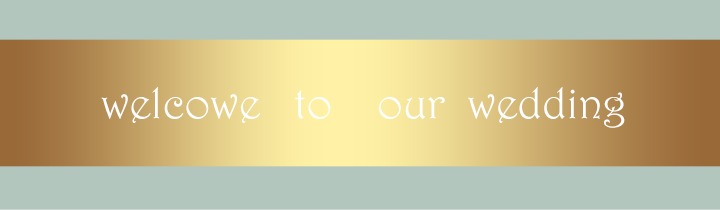
<style>
.page{position:relative;width:720px;height:210px;background:#b2c6bd}
.page>*{position:absolute;margin:0}
.t1{font:44px "Harrington";color:#ffffff}
</style>
<div class="page">
<p class="t1" style="left:101px;top:87px;width:524px;height:41px">welcowe   to    our  wedding</p>
</div>
